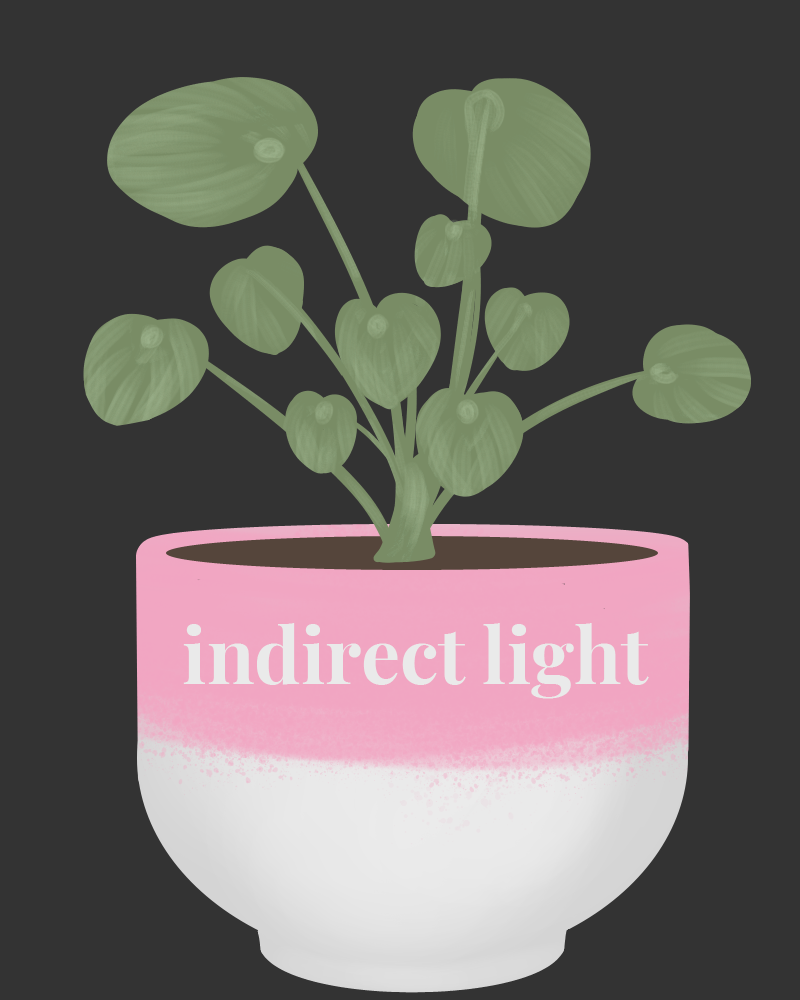
<style>
.page{position:relative;width:800px;height:1000px;background:#333333}
.page>*{position:absolute;margin:0}
.t1{font:77.8px "PlayfairDisplay-Bold";color:#eaeaea}
</style>
<div class="page">
<p class="t1" style="left:183px;top:623px;width:466px;height:76px">indirect light</p>
</div>
